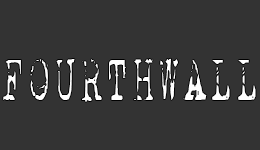
<style>
.page{position:relative;width:260px;height:150px;background:#333333}
.page>*{position:absolute;margin:0}
.t1{font:71.1px "1942report";color:#ffffff;scale:0.56 1}
</style>
<div class="page">
<p class="t1" style="left:3px;top:58px;width:253px;height:44px">FOURTHWALL</p>
</div>
